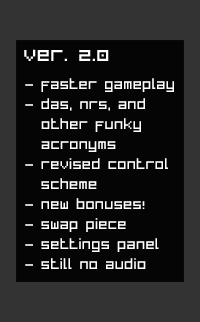
<style>
.page{position:relative;width:200px;height:322px;background:#050505}
.page>*{position:absolute;margin:0}
.t1{font:20px "BitLow";color:#ffffff}
.t2{font:14px/20px "BitLow";color:#ffffff}
</style>
<div class="page">
<p class="t1" style="left:24px;top:49px;width:85px;height:12px">VER. 2.0</p>
<p class="t2" style="left:25px;top:78px;width:149px;height:191px">- FASTER GAMEPLAY<br>- DAS, NRS, AND<br>  OTHER FUNKY<br> ACRONYMS<br>- REVISED CONTROL<br>  SCHEME<br>- NEW BONUSES!<br>- SWAP PIECE<br>- SETTINGS PANEL<br>- STILL NO AUDIO</p>
</div>
